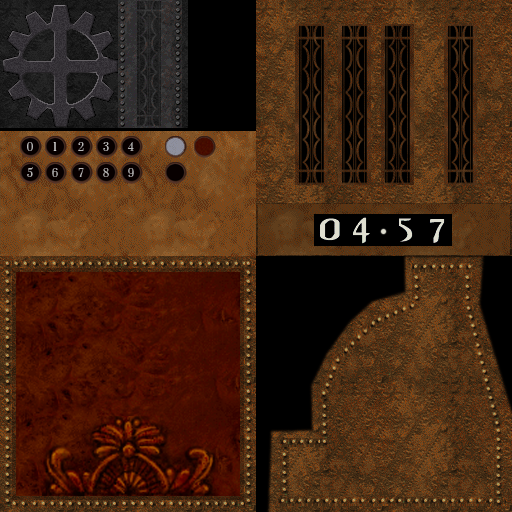
<style>
.page{position:relative;width:512px;height:512px}
.page>*{position:absolute;margin:0}
.t1{font:10px "Prata-Regular";color:#b5b5b5}
.t2{font:10px "Prata-Regular"}
</style>
<div class="page">
<p class="t1" style="left:27px;top:142px;width:6px;height:9px">0</p>
<p class="t2" style="left:53px;top:142px;width:4px;height:9px">1</p>
<p class="t1" style="left:78px;top:142px;width:6px;height:9px">2</p>
<p class="t1" style="left:103px;top:142px;width:6px;height:9px">3</p>
<p class="t1" style="left:127px;top:142px;width:7px;height:9px">4</p>
<p class="t1" style="left:27px;top:167px;width:6px;height:10px">5</p>
<p class="t2" style="left:52px;top:168px;width:6px;height:9px">6</p>
<p class="t1" style="left:78px;top:168px;width:6px;height:9px">7</p>
<p class="t1" style="left:103px;top:168px;width:6px;height:9px">8</p>
<p class="t1" style="left:128px;top:168px;width:6px;height:9px">9</p>
</div>
